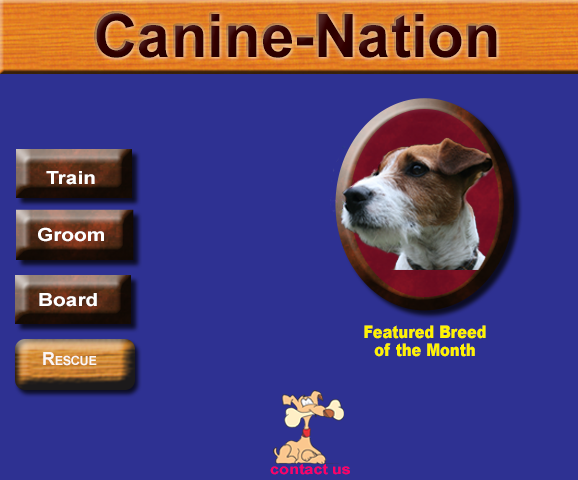
<style>
.page{position:relative;width:578px;height:480px;background:#2e3192}
.page>*{position:absolute;margin:0}
.t1{font:60px "Arial-BoldMT";color:#330000}
.t2{font:18px "Arial-BoldMT";letter-spacing:0.005em;color:#ffffff;scale:1.15 1}
.t3{font:17.5px/18px "Arial-Black";letter-spacing:-0.005em;color:#fff200;scale:0.84 1}
.t4{font:17.5px/24px "Arial-Black";letter-spacing:-0.005em;color:#fff200;scale:0.84 1}
.t5{font:18px "Arial-BoldMT";letter-spacing:-0.025em;color:#faf7f7;font-variant:small-caps}
.t6{font:14px "Arial-BoldMT";letter-spacing:0.005em;color:#ff0066;scale:1.15 1}
</style>
<div class="page">
<p class="t1" style="left:96px;top:13px;width:401px;height:45px">Canine-Nation</p>
<p class="t2" style="left:46px;top:171px;width:49px;height:14px">Train</p>
<p class="t2" style="left:38px;top:227px;width:66px;height:15px">Groom</p>
<p class="t2" style="left:39px;top:293px;width:58px;height:14px">Board</p>
<p class="t3" style="left:364px;top:325px;width:122px;height:32px;text-align:center"><span class="t4">F</span>eatured Breed<br>of the Month</p>
<p class="t5" style="left:43px;top:352px;width:54px;height:14px">Rescue</p>
<p class="t6" style="left:270px;top:464px;width:80px;height:11px">contact us</p>
</div>
